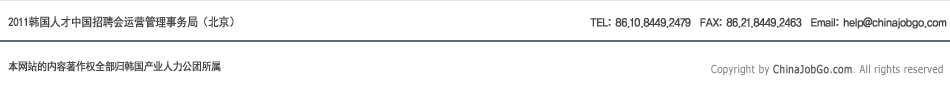
<style>
.page{position:relative;width:950px;height:105px;background:#ffffff}
.page>*{position:absolute;margin:0}
.t1{font:12px "SimHei";letter-spacing:-0.05em;color:#454545;font-weight:bold;scale:0.9 1}
.t2{font:12px "YDIYGO130-KSCpc-EUC-H";letter-spacing:-0.1em;color:#454545;font-weight:bold;scale:0.9 1}
.t3{font:11px "SimHei";letter-spacing:-0.05em;color:#454545;font-weight:bold;scale:0.9 1}
</style>
<div class="page">
<p class="t1" style="left:8px;top:16px;width:226px;height:12px">2011韩国人才中国招聘会运营管理事务局（北京）</p>
<p class="t2" style="left:590px;top:17px;width:357px;height:12px">TEL: 86.10.8449.2479  FAX: 86.21.8449.2463  Email: help@chinajobgo.com</p>
<p class="t3" style="left:8px;top:61px;width:213px;height:11px">本网站的内容著作权全部归韩国产业人力公团所属</p>
</div>
